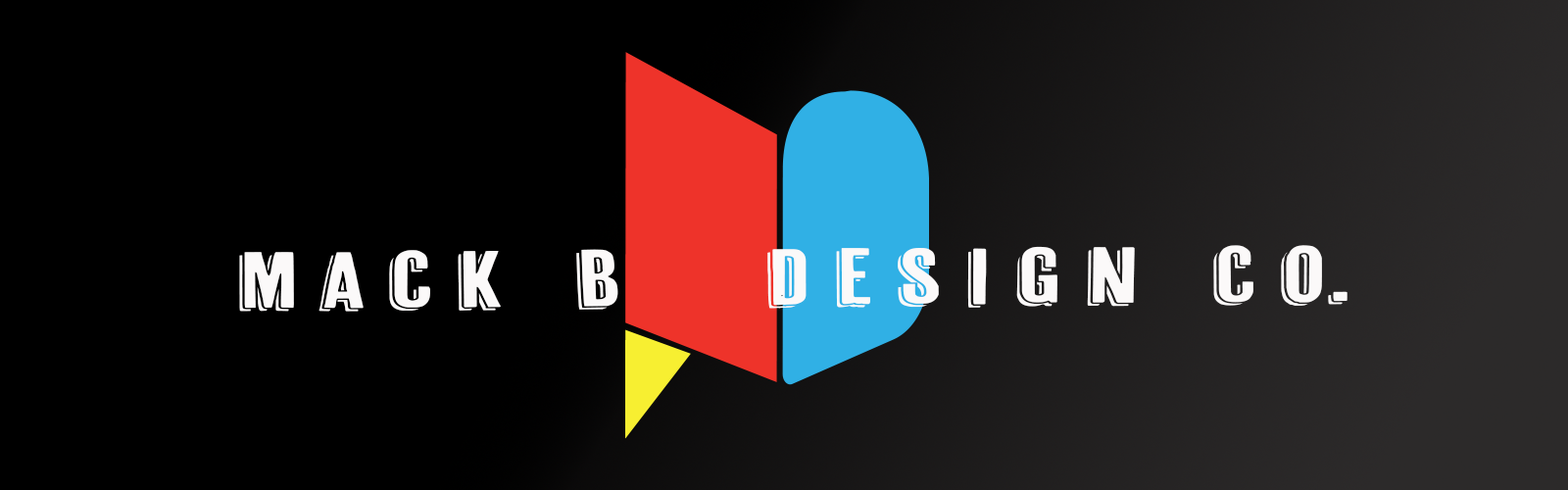
<style>
.page{position:relative;width:1568px;height:490px;background:#000000}
.page>*{position:absolute;margin:0}
.t1{font:79px "CheapPine";color:#fbf9f9;scale:1.61 1}
</style>
<div class="page">
<p class="t1" style="left:239px;top:245px;width:1109px;height:67px">m a c k   b      D E S I G N   C O.</p>
</div>
